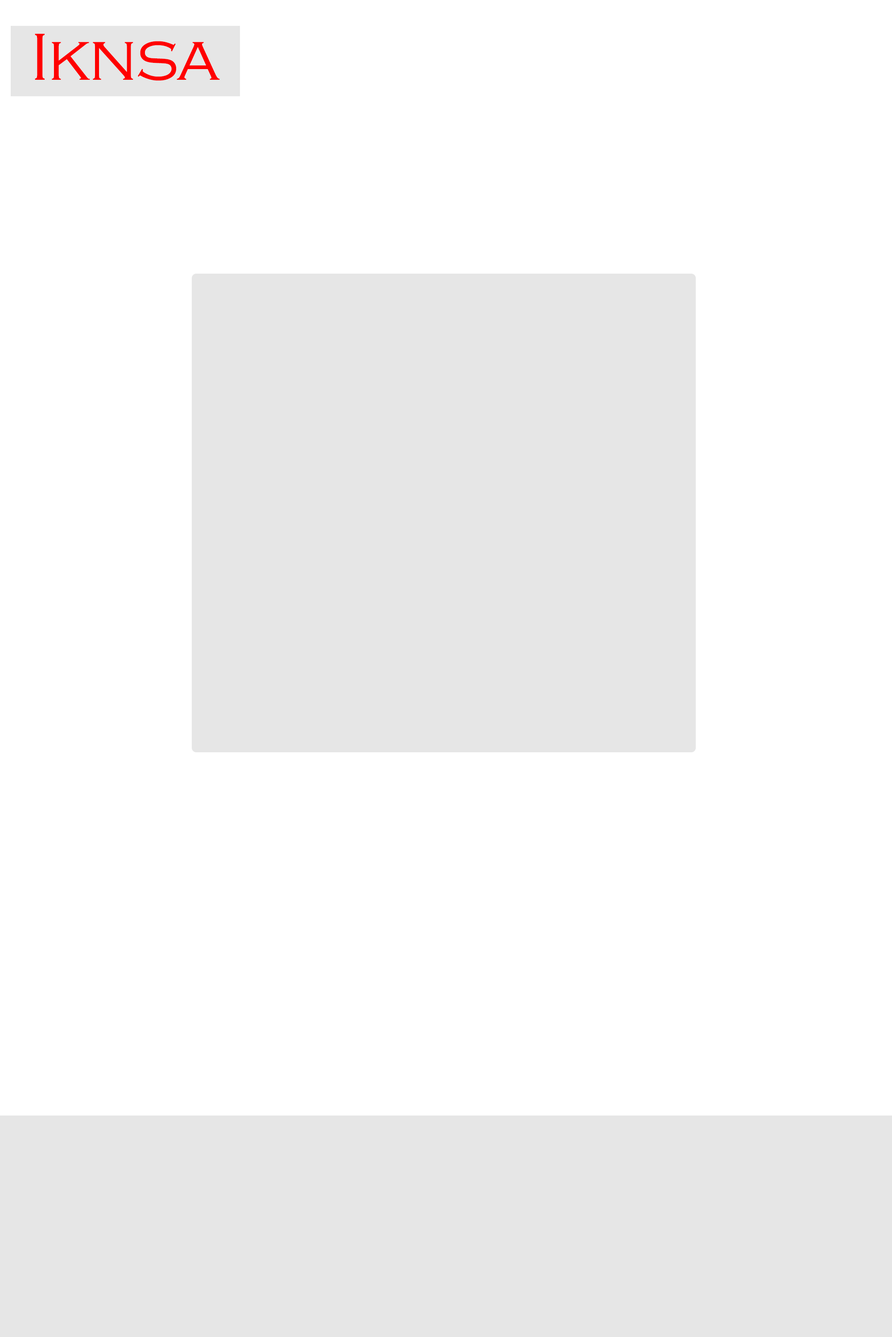
<style>
.page{position:relative;width:892px;height:1337px;background:#ffffff}
.page>*{position:absolute;margin:0}
.t1{font:69.1px "CopperplateGothic-Light";letter-spacing:-0.025em;color:#ff0000}
</style>
<div class="page">
<p class="t1" style="left:35px;top:33px;width:185px;height:48px">Iknsa</p>
</div>
